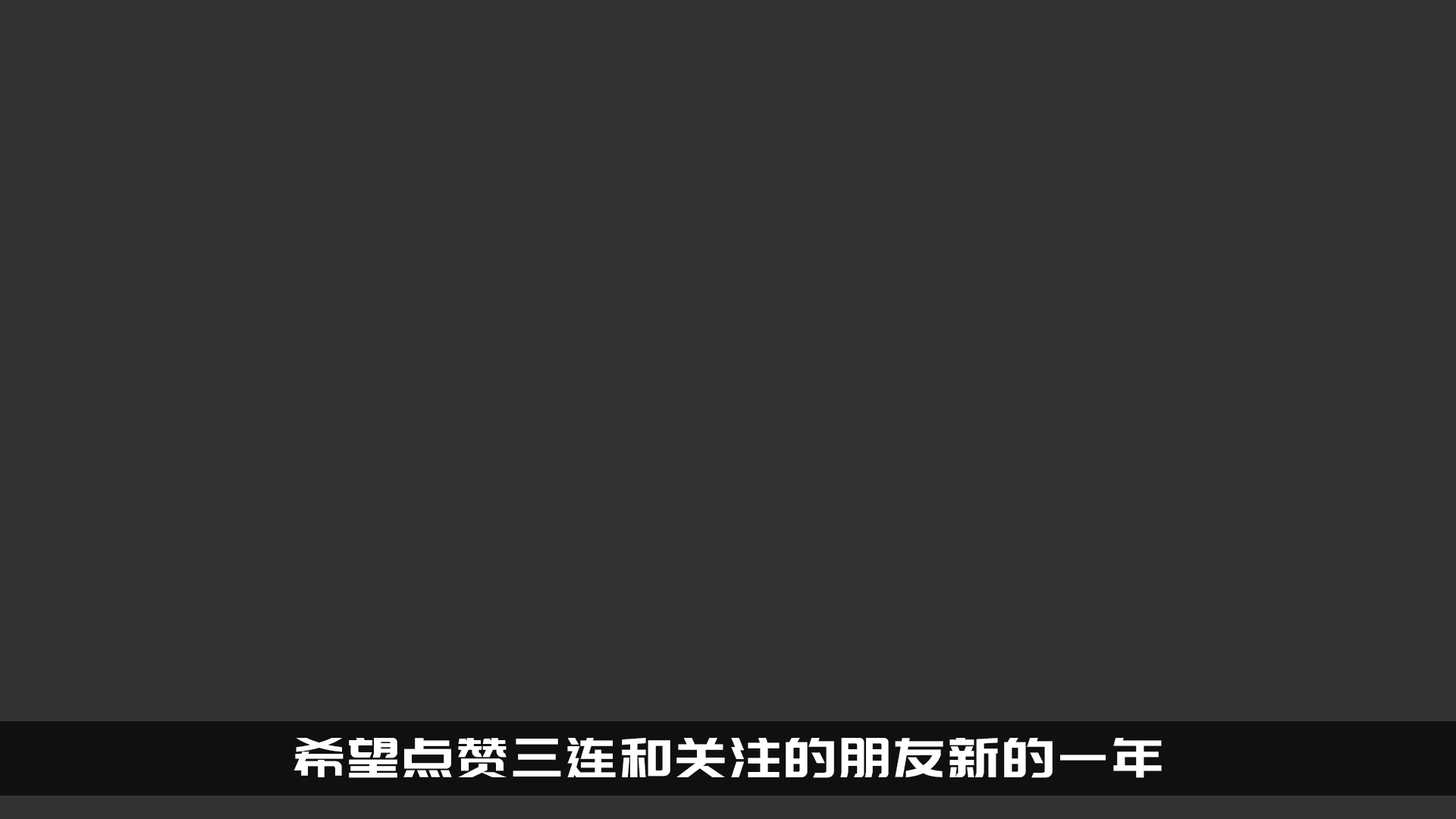
<style>
.page{position:relative;width:1456px;height:819px;background:#333333}
.page>*{position:absolute;margin:0}
.t1{font:54.6px "PangMenZhengDao-3";color:#ffffff}
</style>
<div class="page">
<p class="t1" style="left:293px;top:738px;width:869px;height:40px">希望点赞三连和关注的朋友新的一年</p>
</div>
